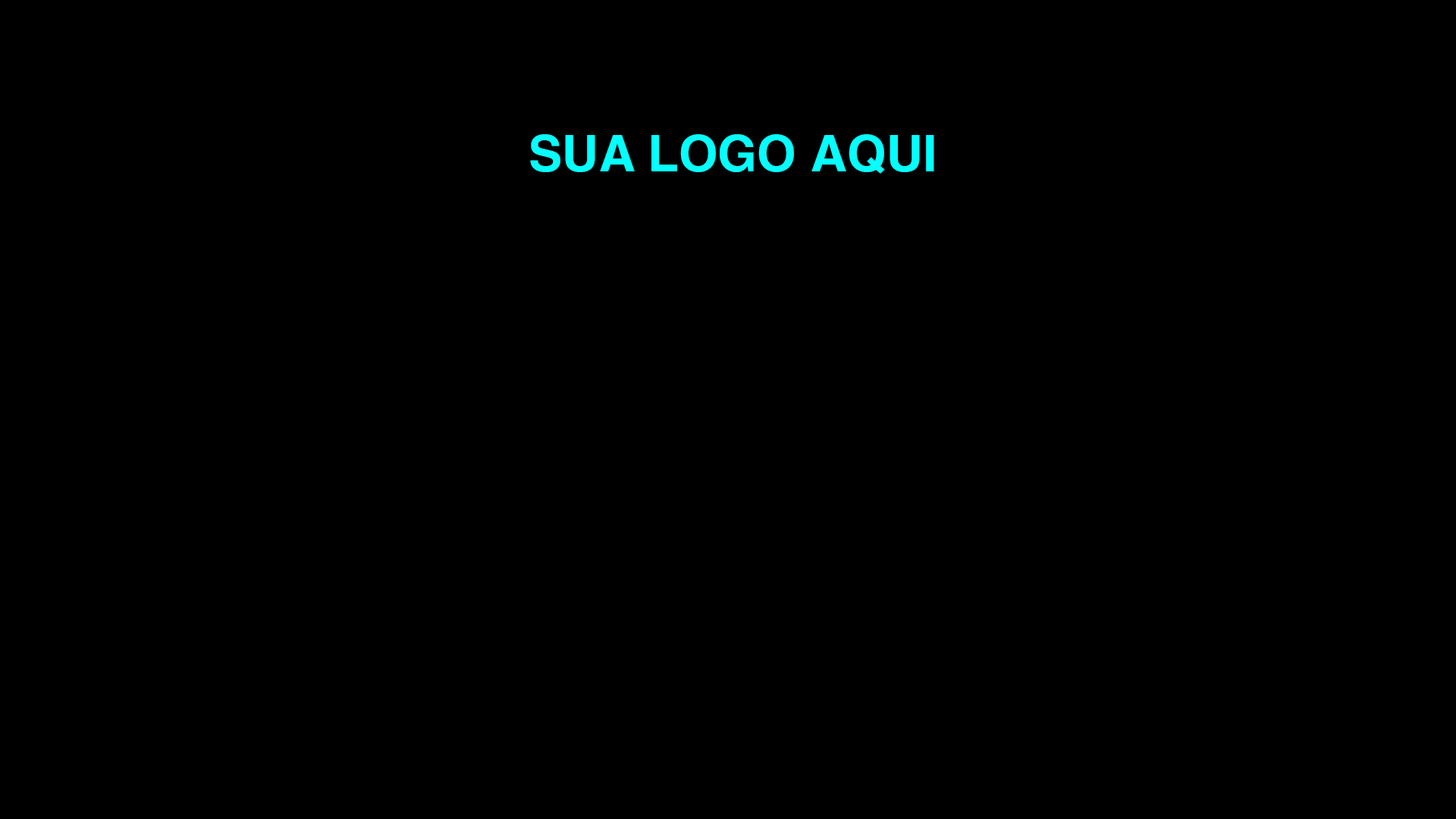
<style>
.page{position:relative;width:1456px;height:819px;background:#000000}
.page>*{position:absolute;margin:0}
.t1{font:50.6px "Helvetica_cyr-Bold";color:#05fffc}
</style>
<div class="page">
<p class="t1" style="left:530px;top:134px;width:404px;height:40px">SUA LOGO AQUI</p>
</div>
